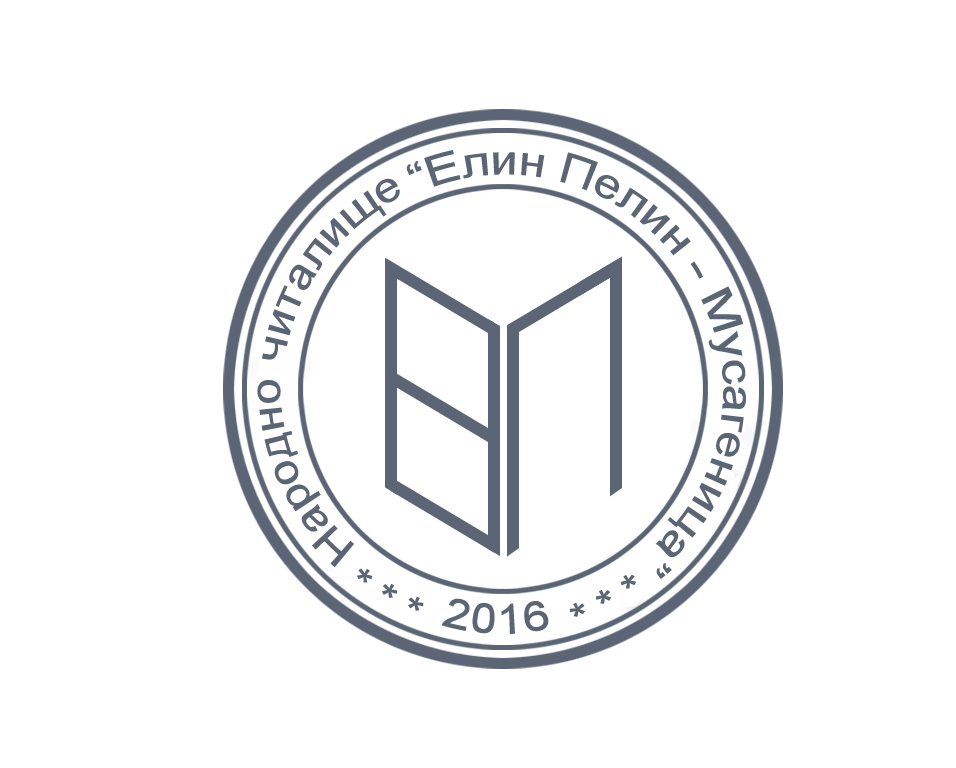
<style>
.page{position:relative;width:956px;height:768px;background:#ffffff}
.page>*{position:absolute;margin:0}
.t1{font:42px "ArialMT";color:#5c6574}
</style>
<div class="page">
<p class="t1" style="left:406px;top:150px;width:285px;height:106px;rotate:16deg">“Елин Пелин</p>
<p class="t1" style="left:262px;top:178px;width:138px;height:182px;rotate:-53deg">читалище</p>
<p class="t1" style="left:690px;top:261px;width:13px;height:18px;rotate:60deg">-</p>
<p class="t1" style="left:655px;top:286px;width:91px;height:293px;rotate:105deg">Мусагеница”</p>
<p class="t1" style="left:257px;top:380px;width:97px;height:187px;rotate:-112deg">Народно</p>
<p class="t1" style="left:357px;top:568px;width:67px;height:43px;rotate:29deg">* * *</p>
<p class="t1" style="left:569px;top:574px;width:67px;height:43px;rotate:151deg">* * *</p>
<p class="t1" style="left:441px;top:598px;width:108px;height:36px;rotate:2deg">2016</p>
</div>
